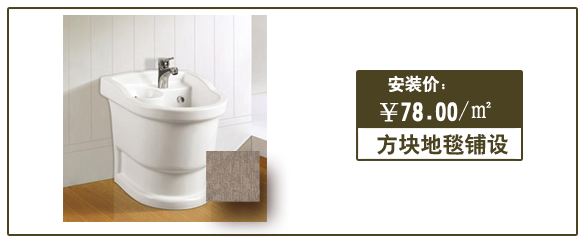
<style>
.page{position:relative;width:585px;height:240px;background:#ffffff}
.page>*{position:absolute;margin:0}
.t1{font:17.2px "HeitiCSEG";color:#fffefe}
.t2{font:23px "HeitiCSEG";color:#ffffff}
.t3{font:23px "SimSun";color:#ffffff}
.t4{font:22.1px "HeitiCSEG";color:#4b4221}
</style>
<div class="page">
<p class="t1" style="left:388px;top:75px;width:57px;height:18px">安装价：</p>
<p class="t2" style="left:380px;top:100px;width:111px;height:22px">￥78.00<span class="t3">/㎡</span></p>
<p class="t4" style="left:377px;top:134px;width:131px;height:21px">方块地毯铺设</p>
</div>
